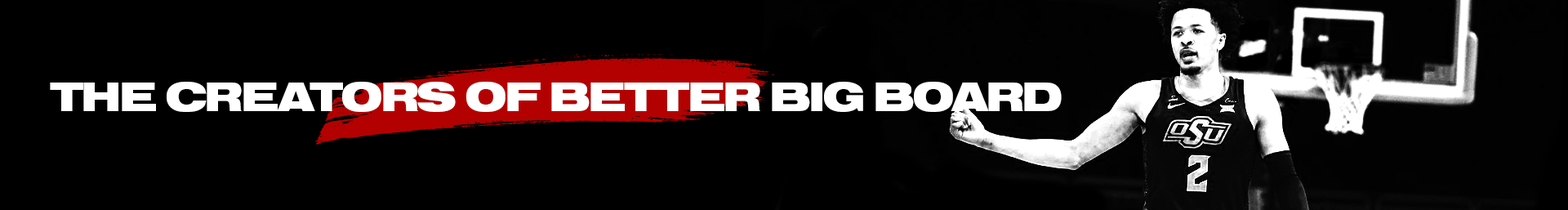
<style>
.page{position:relative;width:1568px;height:210px;background:#000000}
.page>*{position:absolute;margin:0}
.t1{font:43.1px "NimbusSanExt-Bla";letter-spacing:-0.06em;color:#ffffff}
</style>
<div class="page">
<p class="t1" style="left:50px;top:82px;width:1012px;height:30px">THE CREATORS OF BETTER BIG BOARD</p>
</div>
